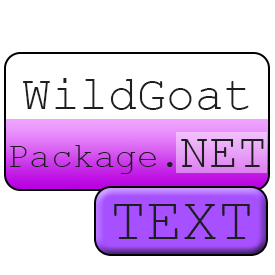
<style>
.page{position:relative;width:275px;height:275px;background:#ffffff}
.page>*{position:absolute;margin:0}
.t1{font:48px "CourierNewPSMT";color:#1e1e1e}
.t2{font:36px "CourierNewPSMT";color:#1e1e1e}
.t3{font:60px "CourierNewPSMT";color:#1e1e1e}
</style>
<div class="page">
<p class="t1" style="left:10px;top:78px;width:254px;height:96px;text-align:center">WildGoat<br><span class="t2">Package.</span>NET</p>
<p class="t3" style="left:114px;top:204px;width:136px;height:35px">TEXT</p>
</div>
